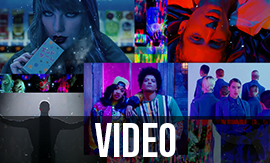
<style>
.page{position:relative;width:270px;height:163px}
.page>*{position:absolute;margin:0}
.t1{font:47.8px "BebasNeue-Regular";color:#ffffff}
</style>
<div class="page">
<p class="t1" style="left:95px;top:123px;width:81px;height:34px">Video</p>
</div>
